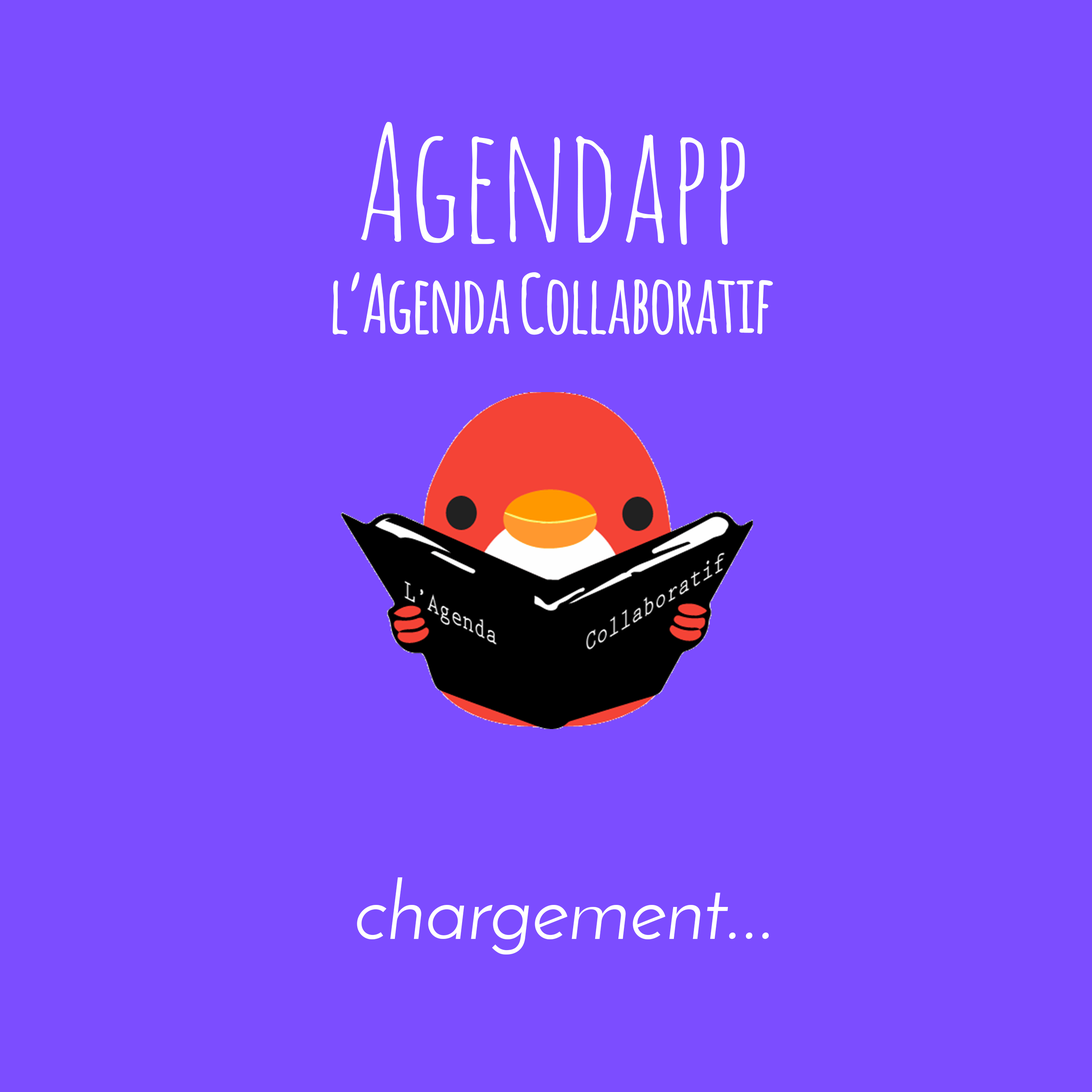
<style>
.page{position:relative;width:1092px;height:1092px;background:#7c4dff}
.page>*{position:absolute;margin:0}
.t1{font:159.9px "AmaticSC-Regular";color:#ffffff}
.t2{font:79.9px "Amatic-Bold";color:#ffffff}
.t3{font:79.9px "JosefinSans";color:#ffffff}
</style>
<div class="page">
<p class="t1" style="left:361px;top:122px;width:384px;height:123px">Agendapp</p>
<p class="t2" style="left:333px;top:272px;width:440px;height:63px">l’Agenda Collaboratif</p>
<p class="t3" style="left:357px;top:877px;width:412px;height:77px">chargement...</p>
</div>
